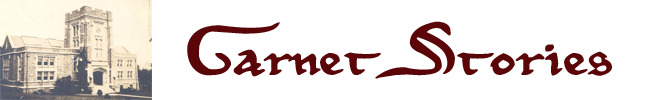
<style>
.page{position:relative;width:656px;height:100px;background:#ffffff}
.page>*{position:absolute;margin:0}
.t1{font:64px "MagnaCarta";color:#5a0609;scale:1.33 1}
</style>
<div class="page">
<p class="t1" style="left:187px;top:21px;width:425px;height:58px">Garnet Stories</p>
</div>
